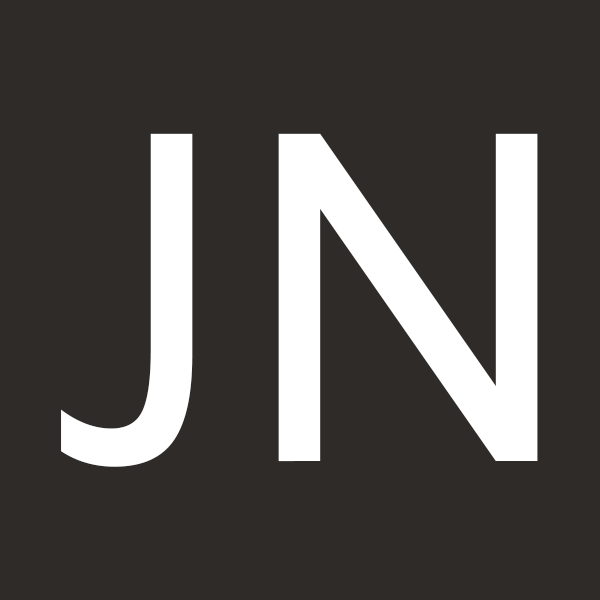
<style>
.page{position:relative;width:600px;height:600px;background:#2f2b29}
.page>*{position:absolute;margin:0}
.t1{font:470px "Amiko-Regular";letter-spacing:-0.055em;color:#ffffff}
</style>
<div class="page">
<p class="t1" style="left:61px;top:133px;width:477px;height:334px">JN</p>
</div>
